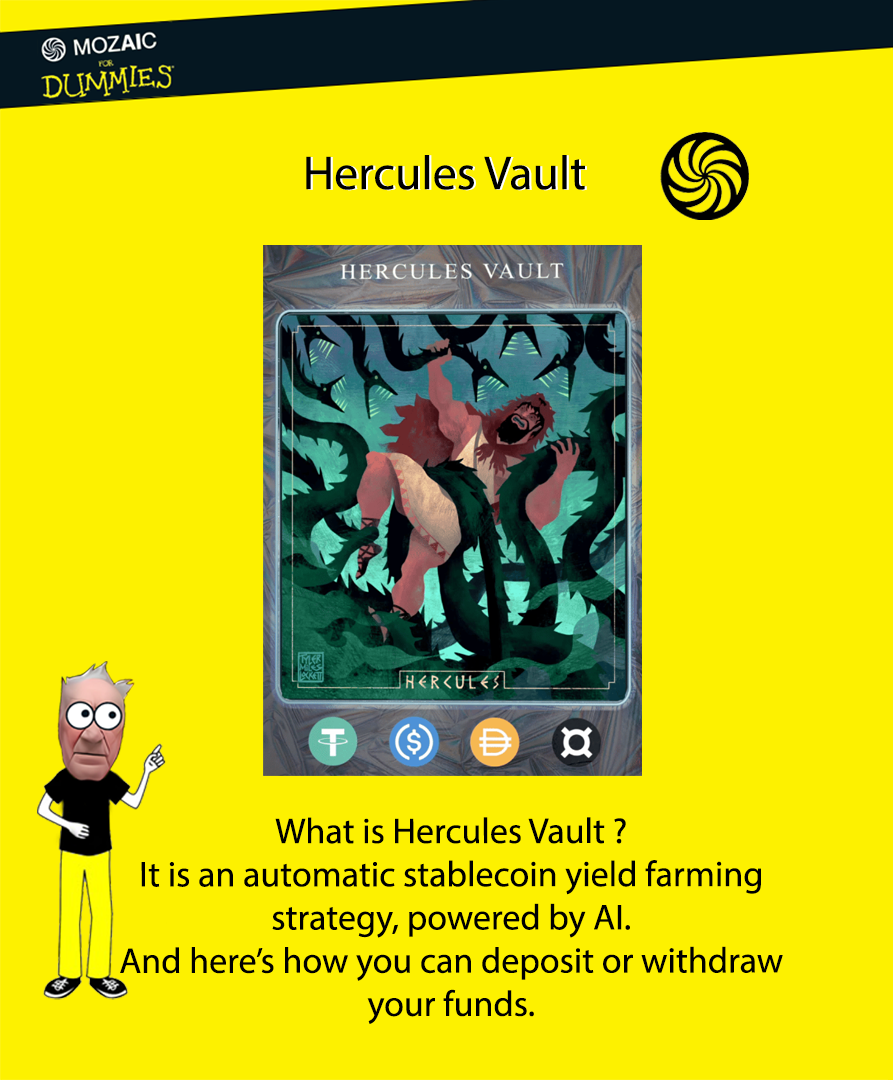
<style>
.page{position:relative;width:893px;height:1080px;background:#fdf100}
.page>*{position:absolute;margin:0}
.t1{font:48px "MyriadPro-Regular";color:#000000}
.t2{font:48px "MyriadPro-Regular"}
.t3{font:36px "MyriadPro-Regular";color:#000000}
</style>
<div class="page">
<p class="t1" style="left:306px;top:155px;width:279px;height:35px">Hercules Vault</p>
<p class="t2" style="left:308px;top:155px;width:279px;height:36px">Hercules Vault</p>
<p class="t3" style="left:120px;top:817px;width:663px;height:207px;text-align:center">What is Hercules Vault ?<br>It is an automatic stablecoin yield farming strategy, powered by AI.<br>And here’s how you can deposit or withdraw your funds.</p>
</div>
